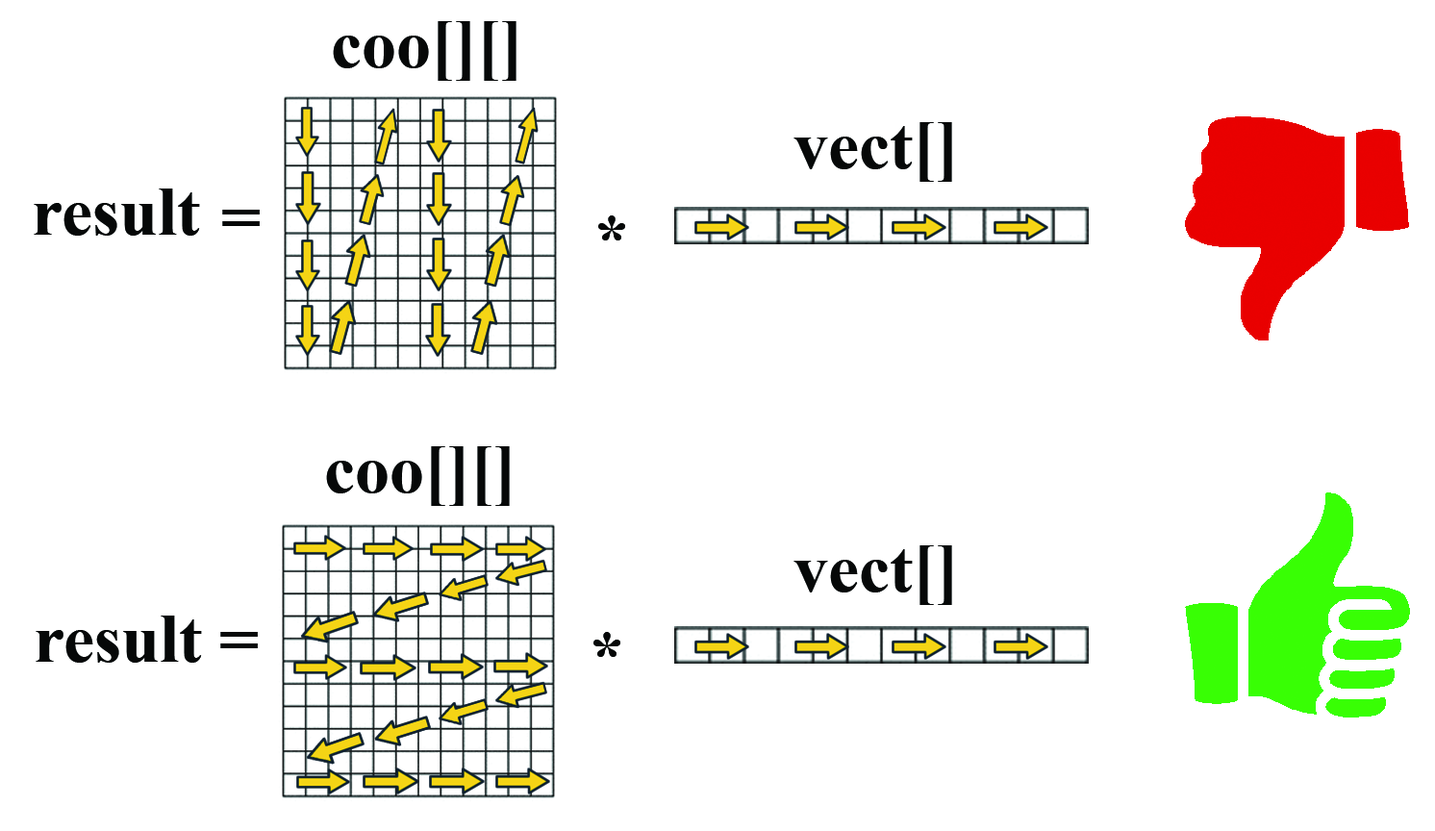
<style>
.page{position:relative;width:1435px;height:831px;background:#ffffff}
.page>*{position:absolute;margin:0}
.t1{font:69.2px "TimesNewRomanPS-BoldMT";color:#060808}
.t2{font:69.3px "TimesNewRomanPS-BoldMT";color:#060808}
</style>
<div class="page">
<p class="t1" style="left:333px;top:21px;width:183px;height:60px">coo[][]</p>
<p class="t1" style="left:793px;top:122px;width:159px;height:60px">vect[]</p>
<p class="t1" style="left:34px;top:189px;width:166px;height:47px">result</p>
<p class="t1" style="left:222px;top:210px;width:38px;height:16px">=</p>
<p class="t1" style="left:598px;top:215px;width:27px;height:25px">*</p>
<p class="t2" style="left:326px;top:446px;width:184px;height:60px">coo[][]</p>
<p class="t2" style="left:793px;top:545px;width:159px;height:60px">vect[]</p>
<p class="t2" style="left:36px;top:616px;width:166px;height:47px">result</p>
<p class="t1" style="left:220px;top:632px;width:38px;height:16px">=</p>
<p class="t1" style="left:593px;top:632px;width:27px;height:25px">*</p>
</div>
